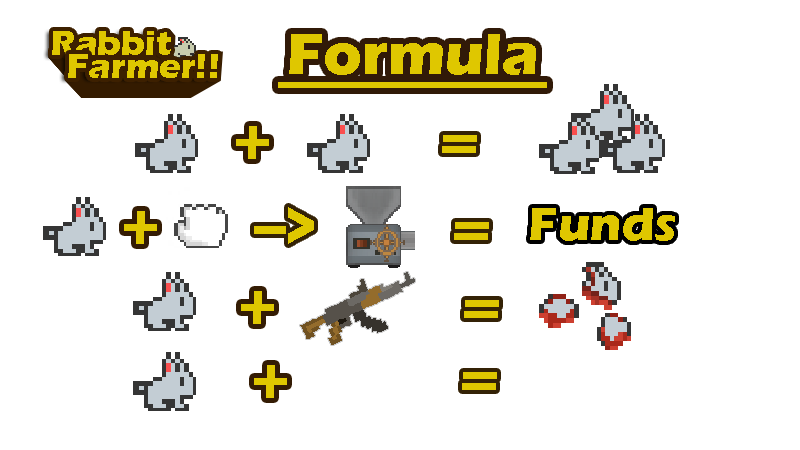
<style>
.page{position:relative;width:800px;height:450px;background:#ffffff}
.page>*{position:absolute;margin:0}
.t1{font:60px "ErasITC-Bold";color:#dfc700}
.t2{font:48px "ErasITC-Bold";color:#dfc700}
</style>
<div class="page">
<p class="t1" style="left:289px;top:34px;width:247px;height:41px">Formula</p>
<p class="t1" style="left:236px;top:126px;width:33px;height:33px">+</p>
<p class="t2" style="left:530px;top:208px;width:145px;height:33px">Funds</p>
<p class="t1" style="left:124px;top:211px;width:33px;height:33px">+</p>
<p class="t1" style="left:241px;top:291px;width:33px;height:33px">+</p>
<p class="t1" style="left:254px;top:365px;width:33px;height:33px">+</p>
</div>
